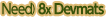
<style>
.page{position:relative;width:106px;height:18px;background:#ffffff}
.page>*{position:absolute;margin:0}
.t1{font:14px "UDShinGoPro-Bold";letter-spacing:-0.08em;color:#375309;scale:0.9 1}
.t2{font:14px "UDShinGoPro-DeBold";letter-spacing:-0.08em;color:#375309;scale:0.9 1}
.t3{font:12px "UDShinGoPro-DeBold";letter-spacing:-0.08em;color:#375309;scale:0.9 1}
.t4{font:12px "UDShinGoPro-Bold";letter-spacing:-0.08em;color:#375309;scale:0.9 1}
</style>
<div class="page">
<p class="t1" style="left:2px;top:2px;width:102px;height:13px"><span class="t2">Need</span><span class="t3">) </span>8<span class="t4">x</span> Devmats</p>
</div>
